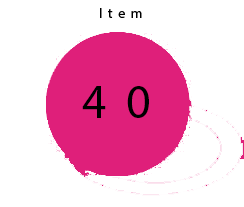
<style>
.page{position:relative;width:244px;height:207px;background:#ffffff}
.page>*{position:absolute;margin:0}
.t1{font:14px "MyriadPro-Regular";letter-spacing:0.4em;color:#000000}
.t2{font:48px "MyriadPro-Regular";letter-spacing:0.4em;color:#000000}
</style>
<div class="page">
<p class="t1" style="left:100px;top:8px;width:42px;height:10px">Item</p>
<p class="t2" style="left:82px;top:86px;width:67px;height:32px">40</p>
</div>
